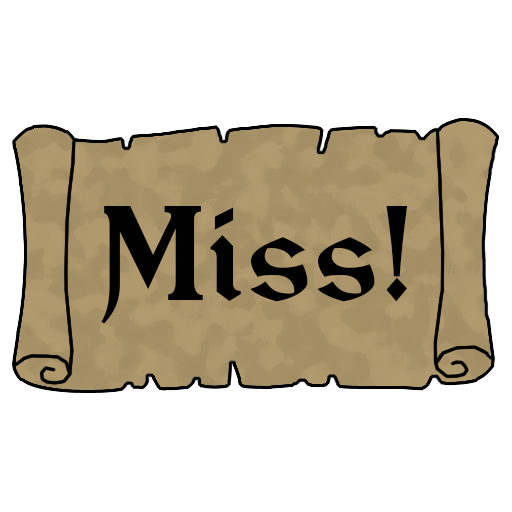
<style>
.page{position:relative;width:512px;height:512px;background:#ffffff}
.page>*{position:absolute;margin:0}
.t1{font:125px "Vinque-Regular";color:#010101}
</style>
<div class="page">
<p class="t1" style="left:101px;top:206px;width:307px;height:118px">Miss!</p>
</div>
